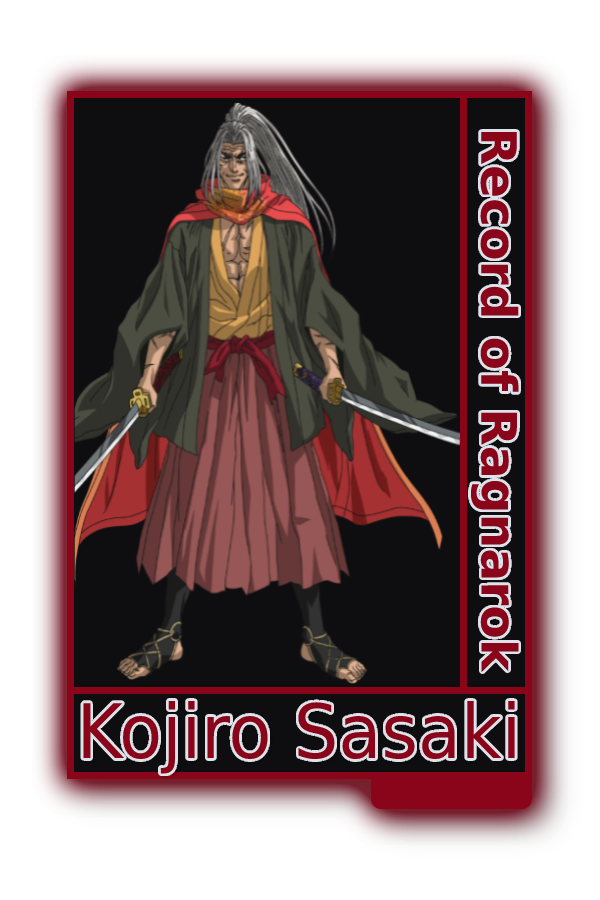
<style>
.page{position:relative;width:600px;height:900px;background:#0e0e10}
.page>*{position:absolute;margin:0}
.t1{font:48.8px "MADETOMMY-Bold";color:#8a051a}
.t2{font:75px "CoolveticaRg-Regular";color:#8a051a;scale:0.94 1}
</style>
<div class="page">
<p class="t1" style="left:470px;top:131px;width:49px;height:542px;rotate:90deg">Record of Ragnarok</p>
<p class="t2" style="left:83px;top:701px;width:432px;height:73px">Kojiro Sasaki</p>
</div>
